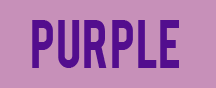
<style>
.page{position:relative;width:216px;height:88px;background:#c790b9}
.page>*{position:absolute;margin:0}
.t1{font:53.6px "Bebas";color:#530e8e;scale:0.91 1}
</style>
<div class="page">
<p class="t1" style="left:32px;top:20px;width:147px;height:48px">purple</p>
</div>
